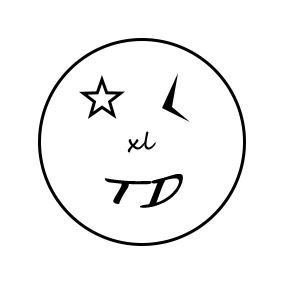
<style>
.page{position:relative;width:283px;height:283px;background:#ffffff}
.page>*{position:absolute;margin:0}
.t1{font:24px "SegoeScript";color:#000000}
.t2{font:36.8px "MVBoli";color:#000000;scale:1.71 1}
</style>
<div class="page">
<p class="t1" style="left:127px;top:131px;width:29px;height:22px">xl</p>
<p class="t2" style="left:104px;top:174px;width:79px;height:34px">TD</p>
</div>
